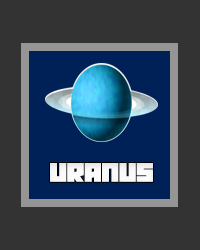
<style>
.page{position:relative;width:200px;height:250px;background:#333333}
.page>*{position:absolute;margin:0}
.t1{font:27.4px "RobotRadicals";color:#ffffff}
</style>
<div class="page">
<p class="t1" style="left:50px;top:163px;width:103px;height:19px">uranus</p>
</div>
